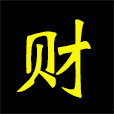
<style>
.page{position:relative;width:114px;height:114px;background:#000000}
.page>*{position:absolute;margin:0}
.t1{font:94px "Weibei-SC-Bold";color:#f9f607}
</style>
<div class="page">
<p class="t1" style="left:17px;top:19px;width:74px;height:79px">财</p>
</div>
